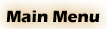
<style>
.page{position:relative;width:107px;height:29px}
.page>*{position:absolute;margin:0}
.t1{font:16.7px "ErasITC-Bold";color:#000000}
</style>
<div class="page">
<p class="t1" style="left:6px;top:10px;width:94px;height:13px">Main Menu</p>
</div>
